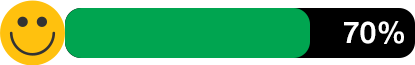
<style>
.page{position:relative;width:415px;height:65px;background:#00a550}
.page>*{position:absolute;margin:0}
.t1{font:30px "HelveticaNeueCyr-Medium";color:#ffffff}
</style>
<div class="page">
<p class="t1" style="left:344px;top:21px;width:60px;height:23px">70%</p>
</div>
